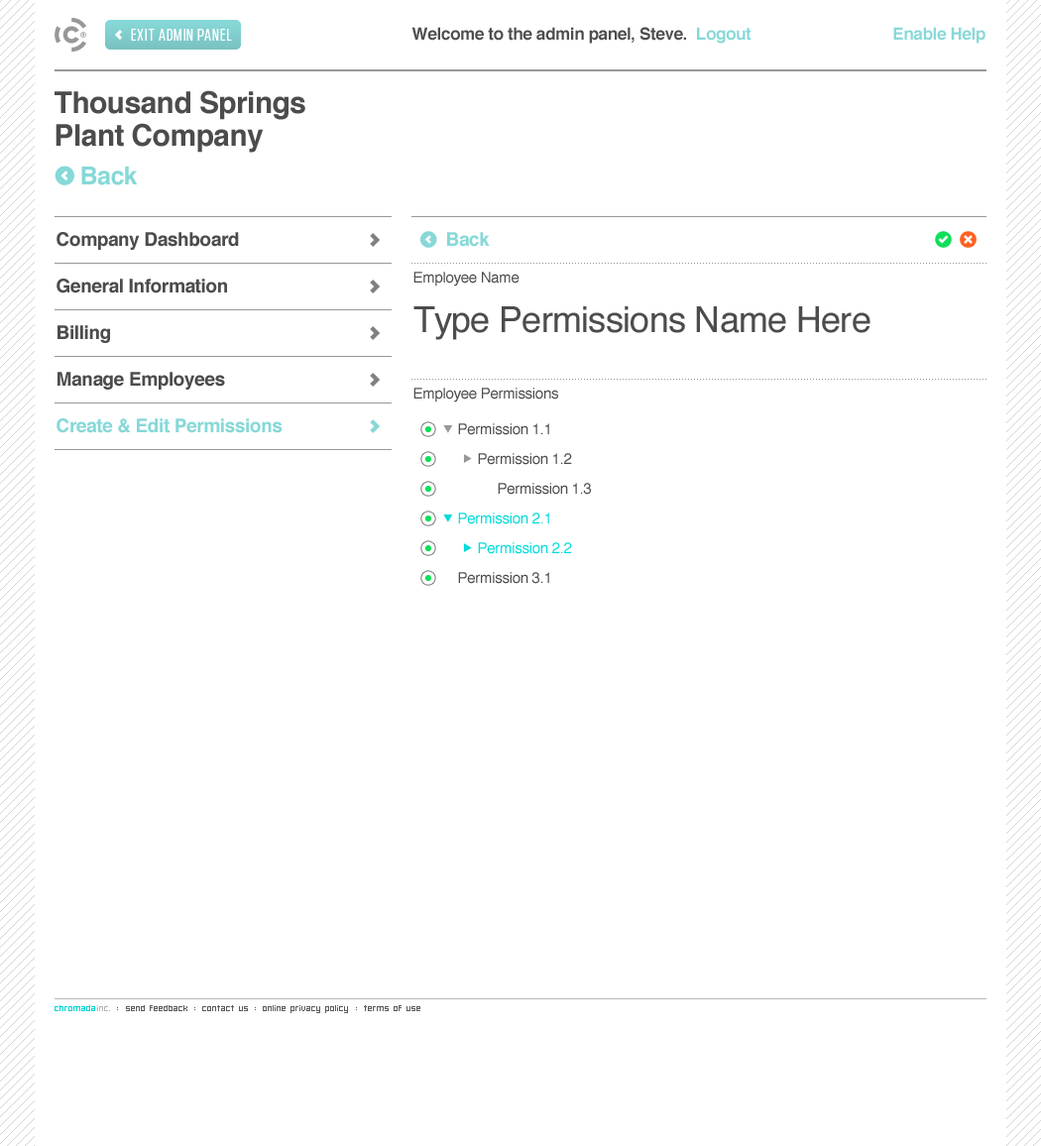
<style>
.page{position:relative;width:1041px;height:1146px;background:#ffffff}
.page>*{position:absolute;margin:0}
.t1{font:16.8px "ChromadicaCondensed";letter-spacing:0.06em;color:#ffffff}
.t2{font:16.8px "Helvetica-Bold";letter-spacing:-0.02em;color:#87d8d8}
.t3{font:16.8px "Helvetica-Bold";letter-spacing:-0.02em;color:#4c4c4c}
.t4{font:29.7px/32.7px "Helvetica-Bold";letter-spacing:-0.02em;color:#4c4c4c}
.t5{font:24.8px/38.7px "Helvetica-Bold";letter-spacing:-0.02em;color:#87d8d8}
.t6{font:18.8px/46.6px "Helvetica-Bold";letter-spacing:-0.02em;color:#4c4c4c}
.t7{font:18.8px/46.6px "Helvetica-Bold";letter-spacing:-0.02em;color:#87d8d8}
.t8{font:14.9px/29.7px "Helvetica";letter-spacing:-0.02em;color:#4c4c4c}
.t9{font:14.9px/36.7px "Helvetica";letter-spacing:-0.02em;color:#4c4c4c}
.t10{font:35.7px/49.6px "Helvetica";letter-spacing:-0.02em;color:#4c4c4c}
.t11{font:14.9px/19.8px "Helvetica";letter-spacing:-0.02em;color:#4c4c4c}
.t12{font:14.9px/35.7px "Helvetica";letter-spacing:-0.02em;color:#4c4c4c}
.t13{font:14.9px/29.7px "Helvetica";letter-spacing:-0.02em;color:#01dbdb}
.t14{font:7.9px "Hooge0655";color:#5b5b5b}
.t15{font:7.9px "Hooge0655";color:#00d3d3}
.t16{font:7.9px "Hooge0655";color:#b6b6b6}
.t17{font:7.9px "Hooge0655";color:#5b5b5b;text-transform:uppercase}
</style>
<div class="page">
<p class="t1" style="left:131px;top:29px;width:101px;height:12px">EXIT ADMIN PANEL</p>
<p class="t2" style="left:411px;top:27px;width:574px;height:17px"><span class="t3">Welcome to the admin panel, Steve.</span>  Logout                                 Enable Help</p>
<p class="t4" style="left:55px;top:90px;width:250px;height:95px">Thousand Springs <br>Plant Company<br><span class="t5">    Back</span></p>
<p class="t6" style="left:56px;top:232px;width:226px;height:201px">Company Dashboard<br>General Information<br>Billing<br>Manage Employees<br><span class="t7">Create &amp; Edit Permissions</span></p>
<p class="t8" style="left:413px;top:232px;width:457px;height:352px"><span class="t7">Back<br></span><span class="t9">Employee Name<br></span><span class="t10">Type Permissions Name Here<br><br></span><span class="t11">Employee Permissions<br></span><span class="t12">Permission 1.1<br></span>Permission 1.2<br>Permission 1.3<br><span class="t13">Permission 2.1<br>Permission 2.2<br></span>Permission 3.1</p>
<p class="t14" style="left:55px;top:1005px;width:365px;height:8px"><span class="t15">chromada</span><span class="t16">inc. </span><span class="t17">: </span>send feedback <span class="t17">: </span>contact us <span class="t17">: </span>online privacy policy <span class="t17">: </span>terms of use</p>
</div>
